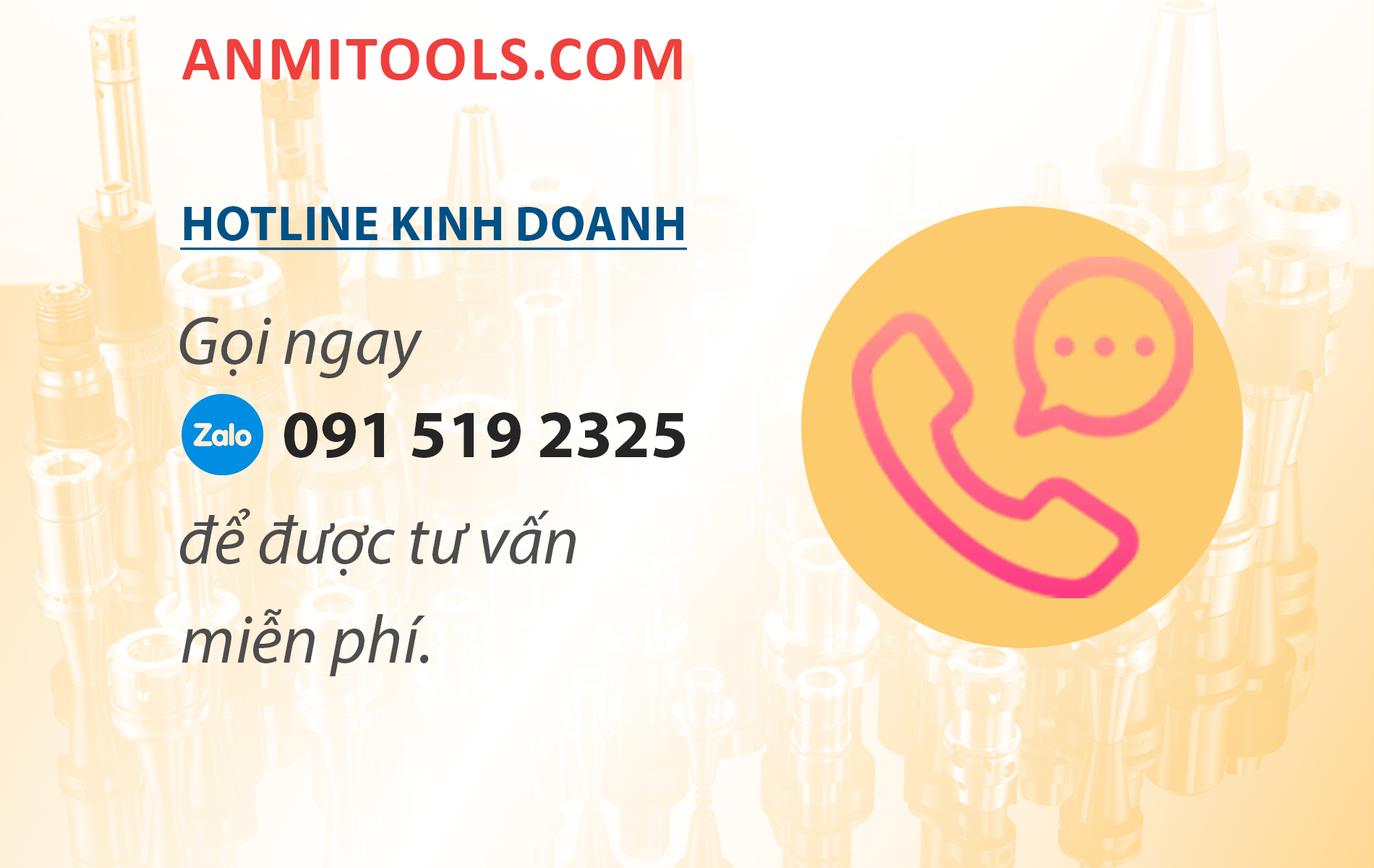
<style>
.page{position:relative;width:1374px;height:868px}
.page>*{position:absolute;margin:0}
.t1{font:64px "Calibri-Bold";color:#ef403d;text-transform:uppercase}
.t2{font:48.8px "MyriadPro-Bold";color:#005185;text-transform:uppercase;text-decoration:underline}
.t3{font:68.3px "MyriadPro-It";color:#4d4d4d}
.t4{font:68.2px "MyriadPro-Bold";color:#262525;text-transform:uppercase}
</style>
<div class="page">
<p class="t1" style="left:182px;top:38px;width:500px;height:42px">anmitools.com</p>
<p class="t2" style="left:180px;top:206px;width:507px;height:44px">hotline kinh doanh</p>
<p class="t3" style="left:179px;top:317px;width:243px;height:62px">Gọi ngay</p>
<p class="t4" style="left:284px;top:412px;width:401px;height:46px">091 519 2325</p>
<p class="t3" style="left:180px;top:508px;width:396px;height:68px">để được tư vấn</p>
<p class="t3" style="left:182px;top:609px;width:247px;height:67px">miễn phí.</p>
</div>
